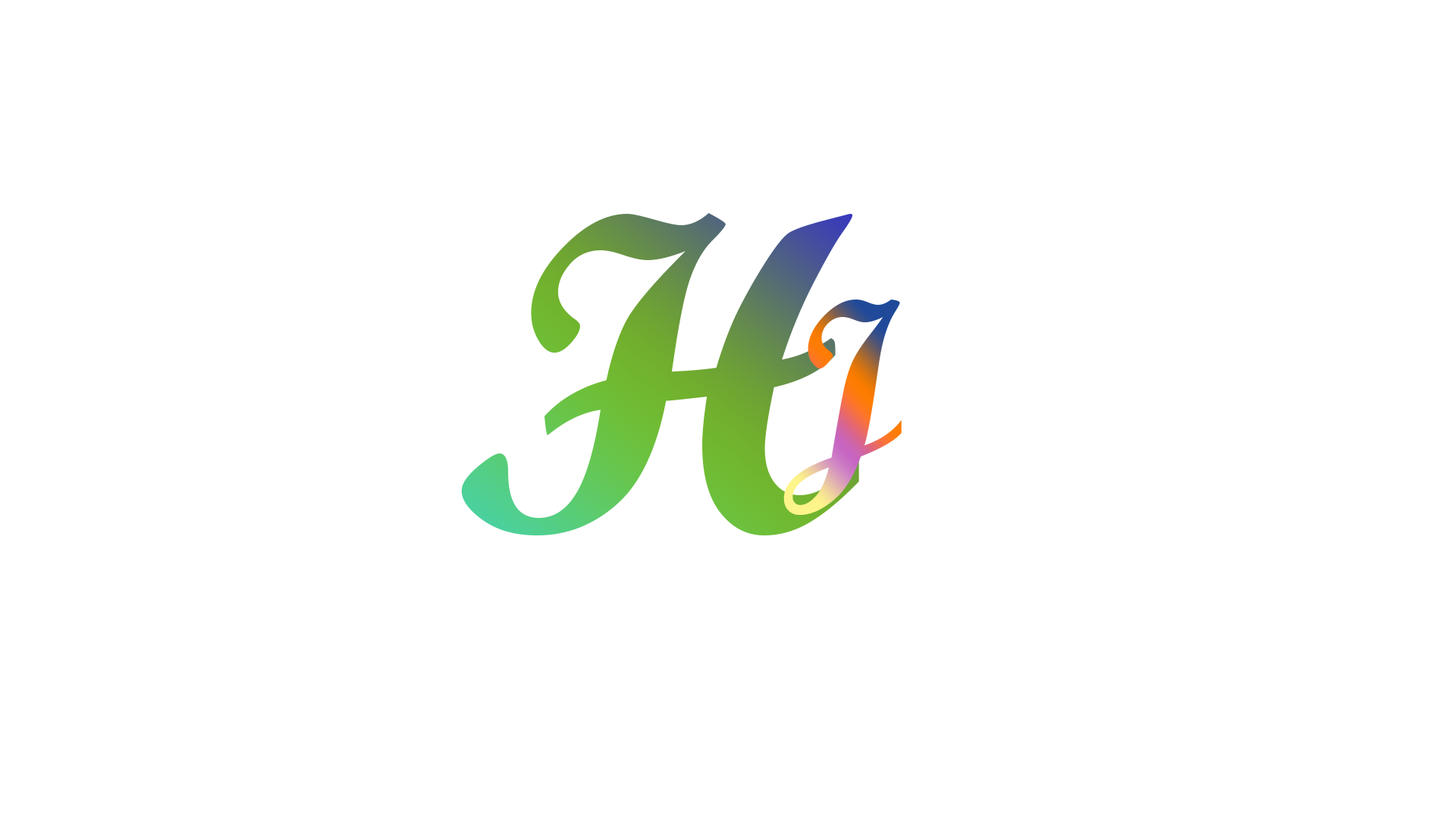
<style>
.page{position:relative;width:1456px;height:819px;background:#ffffff}
.page>*{position:absolute;margin:0}
.t1{font:455px "ScriptMTBold"}
.t2{font:227.5px "ScriptMTBold"}
</style>
<div class="page">
<p class="t1" style="left:461px;top:212px;width:398px;height:323px">H</p>
<p class="t2" style="left:783px;top:299px;width:119px;height:216px">J</p>
</div>
